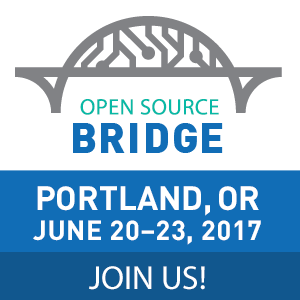
<style>
.page{position:relative;width:300px;height:300px;background:#ffffff}
.page>*{position:absolute;margin:0}
.t1{font:22.4px "DIN-Bold";letter-spacing:0.02em;color:#08b9a6}
.t2{font:41.6px "DIN-Black";letter-spacing:0.06em;color:#116db6}
.t3{font:41.6px "DIN-Black";letter-spacing:0.02em;color:#116db6}
.t4{font:41.6px "DIN-Black";letter-spacing:0.03em;color:#116db6}
.t5{font:27.2px/30.2px "DIN-Bold";letter-spacing:0.02em;color:#ffffff}
.t6{font:33.2px/30.2px "DIN-Bold";color:#ffffff}
.t7{font:33.2px "DIN-Bold";color:#ffffff}
</style>
<div class="page">
<p class="t1" style="left:80px;top:99px;width:139px;height:16px">OPEN SOURCE</p>
<p class="t2" style="left:73px;top:123px;width:150px;height:30px"><span class="t3">B</span>RI<span class="t4">D</span><span class="t3">GE</span></p>
<p class="t5" style="left:33px;top:186px;width:228px;height:59px;text-align:center"><span class="t6">PORTLAND, OR<br></span>JUNE 20–23, 2017</p>
<p class="t7" style="left:89px;top:266px;width:116px;height:24px">JOIN US!</p>
</div>
